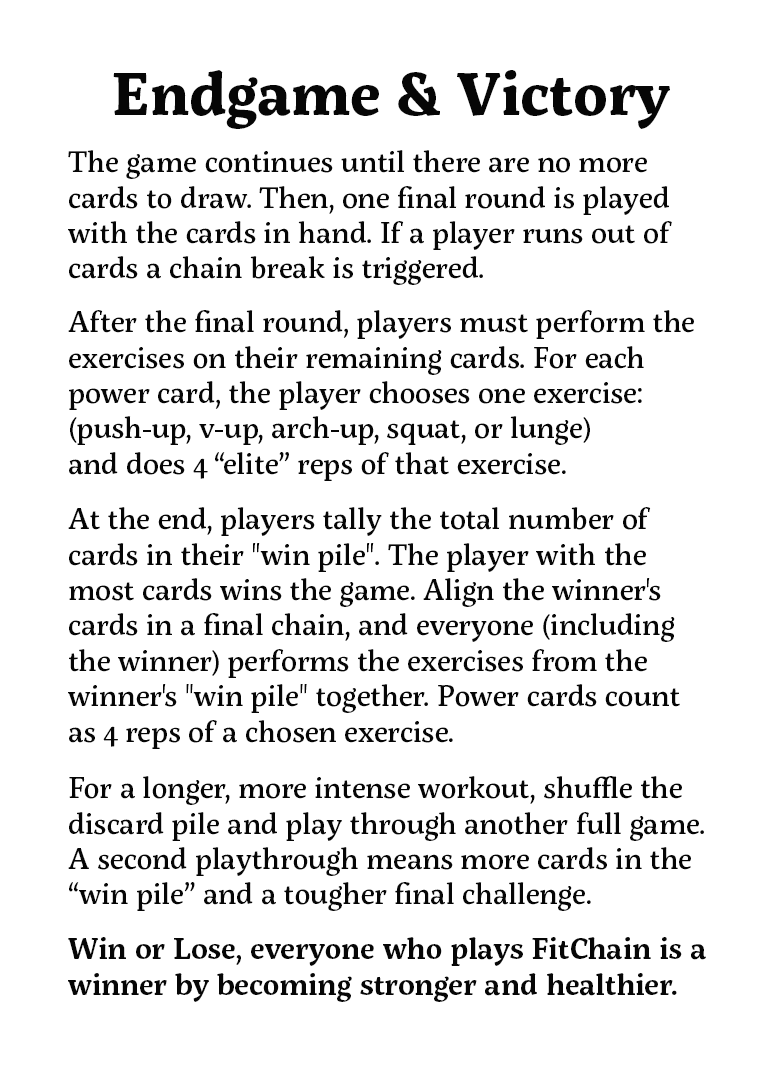
<style>
.page{position:relative;width:784px;height:1066px;background:#ffffff}
.page>*{position:absolute;margin:0}
.t1{font:60px "ServusSlab-Bold";color:#060606}
.t2{font:29.5px "ServusSlab-Medium";color:#060606}
.t3{font:30px "ServusSlab-SemiBold";color:#060606}
</style>
<div class="page">
<p class="t1" style="left:113px;top:70px;width:557px;height:59px">Endgame &amp; Victory</p>
<p class="t2" style="left:68px;top:150px;width:604px;height:135px">The game continues until there are no more cards to draw. Then, one final round is played with the cards in hand. If a player runs out of cards a chain break is triggered.</p>
<p class="t2" style="left:68px;top:310px;width:626px;height:171px">After the final round, players must perform the exercises on their remaining cards. For each power card, the player chooses one exercise: (push-up, v-up, arch-up, squat, or lunge) <br>and does 4 “elite” reps of that exercise.</p>
<p class="t2" style="left:68px;top:507px;width:612px;height:242px">At the end, players tally the total number of cards in their "win pile". The player with the most cards wins the game. Align the winner's cards in a final chain, and everyone (including the winner) performs the exercises from the winner's "win pile" together. Power cards count as 4 reps of a chosen exercise.</p>
<p class="t2" style="left:68px;top:776px;width:636px;height:135px">For a longer, more intense workout, shuffle the discard pile and play through another full game. A second playthrough means more cards in the “win pile” and a tougher final challenge.</p>
<p class="t3" style="left:68px;top:937px;width:638px;height:65px">Win or Lose, everyone who plays FitChain is a winner by becoming stronger and healthier.</p>
</div>
